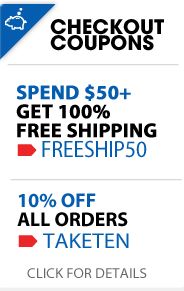
<style>
.page{position:relative;width:184px;height:291px;background:#ffffff}
.page>*{position:absolute;margin:0}
.t1{font:20px "AvantGarde-Bold";color:#000000;text-transform:uppercase}
.t2{font:20px/19px "MyriadPro-Bold";color:#000000;text-transform:uppercase;font-weight:bold}
.t3{font:20px/19px "MyriadPro-Bold";color:#055daf;text-transform:uppercase;font-weight:bold}
.t4{font:23.6px "MyriadPro-Regular";color:#055daf;text-transform:uppercase;scale:0.91 1}
.t5{font:20px/19px "MyriadPro-Bold";color:#000000;text-transform:uppercase}
.t6{font:20px/19px "MyriadPro-Bold";color:#055daf;text-transform:uppercase}
.t7{font:21.6px "MyriadPro-Regular";color:#055daf;text-transform:uppercase;scale:1.06 1}
.t8{font:14px "MyriadPro-Regular";color:#696969;text-transform:uppercase;scale:1.06 1}
</style>
<div class="page">
<p class="t1" style="left:50px;top:19px;width:114px;height:16px">Checkout</p>
<p class="t1" style="left:50px;top:35px;width:104px;height:16px">cOUPONS</p>
<p class="t2" style="left:16px;top:84px;width:141px;height:54px"><span class="t3">Spend $50+<br></span>get 100% <br>free shipping</p>
<p class="t4" style="left:42px;top:140px;width:105px;height:18px">freeship50</p>
<p class="t5" style="left:17px;top:193px;width:111px;height:34px"><span class="t6">10% OFF <br></span>ALL ORDERS</p>
<p class="t7" style="left:43px;top:233px;width:86px;height:15px">TAKETEN</p>
<p class="t8" style="left:27px;top:268px;width:120px;height:10px">click for details</p>
</div>
